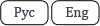
<style>
.page{position:relative;width:100px;height:26px;background:#ffffff}
.page>*{position:absolute;margin:0}
.t1{font:14px "Cambria";color:#3d464f}
</style>
<div class="page">
<p class="t1" style="left:14px;top:7px;width:75px;height:13px">Рус          Eng</p>
</div>
